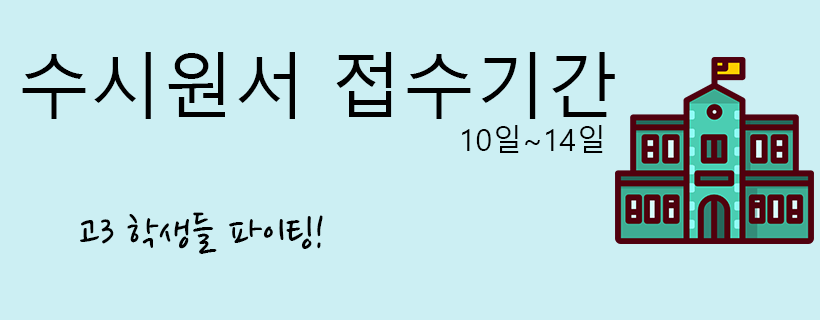
<style>
.page{position:relative;width:820px;height:320px;background:#cceff3}
.page>*{position:absolute;margin:0}
.t1{font:72px "MalgunGothic";color:#000000}
.t2{font:30px "MalgunGothic";color:#000000}
.t3{font:48px "NanumPen";color:#000000}
</style>
<div class="page">
<p class="t1" style="left:22px;top:52px;width:593px;height:67px">수시원서 접수기간</p>
<p class="t2" style="left:462px;top:125px;width:141px;height:28px">10일~14일</p>
<p class="t3" style="left:80px;top:212px;width:243px;height:42px">고3 학생들 파이팅!</p>
</div>
